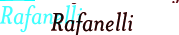
<style>
.page{position:relative;width:179px;height:35px;background:#ffffff}
.page>*{position:absolute;margin:0}
.t1{font:30px "MrsEavesItalic";color:#40ffff}
</style>
<div class="page">
<p class="t1" style="left:0px;top:5px;width:82px;height:28px">Rafanelli</p>
</div>
